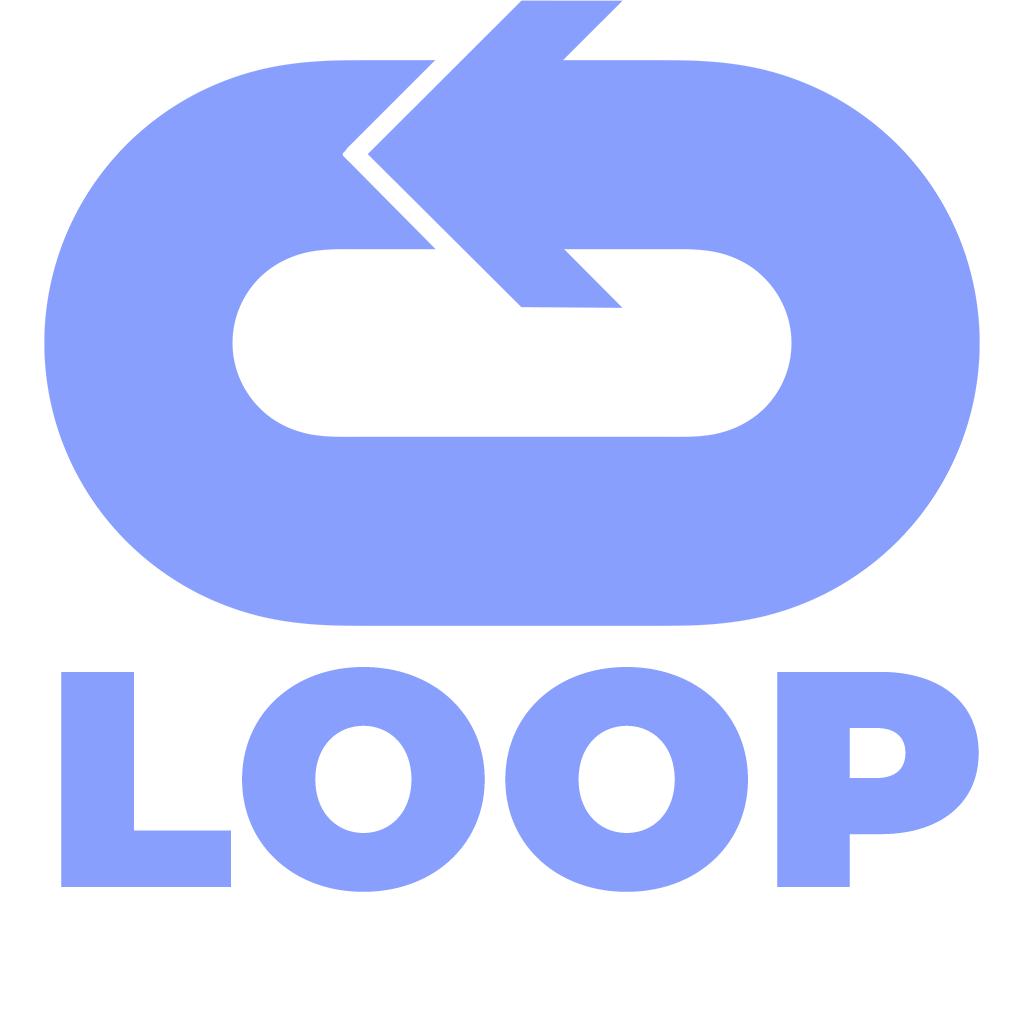
<style>
.page{position:relative;width:1024px;height:1024px;background:#ffffff}
.page>*{position:absolute;margin:0}
.t1{font:306.8px "Montserrat-Black";letter-spacing:0.01em;color:#899ffe}
</style>
<div class="page">
<p class="t1" style="left:61px;top:667px;width:918px;height:225px">LOOP</p>
</div>
